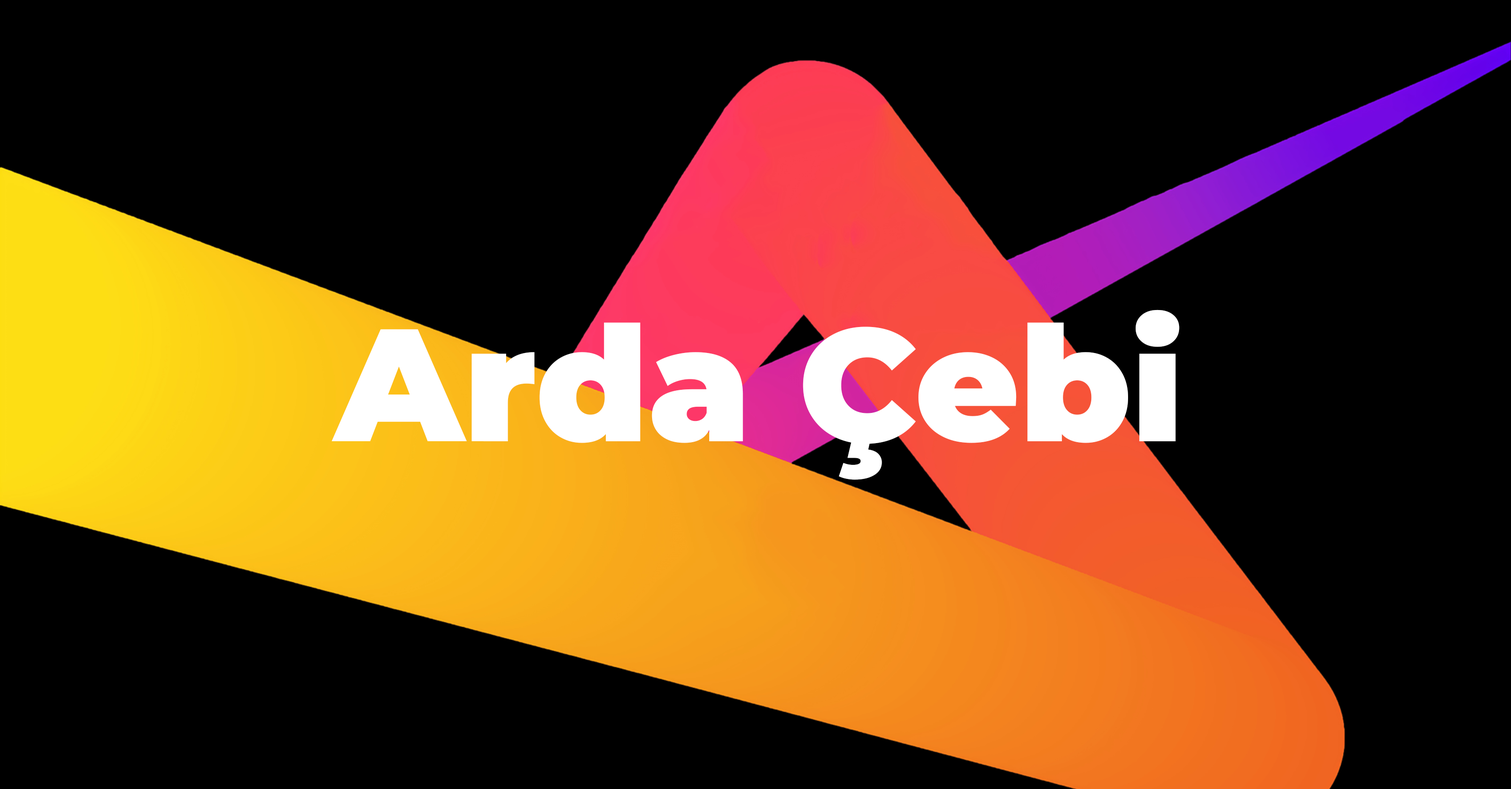
<style>
.page{position:relative;width:1511px;height:789px;background:#000000}
.page>*{position:absolute;margin:0}
.t1{font:159.9px "Montserrat-Black";color:#ffffff}
</style>
<div class="page">
<p class="t1" style="left:331px;top:310px;width:848px;height:170px">Arda Çebi</p>
</div>
